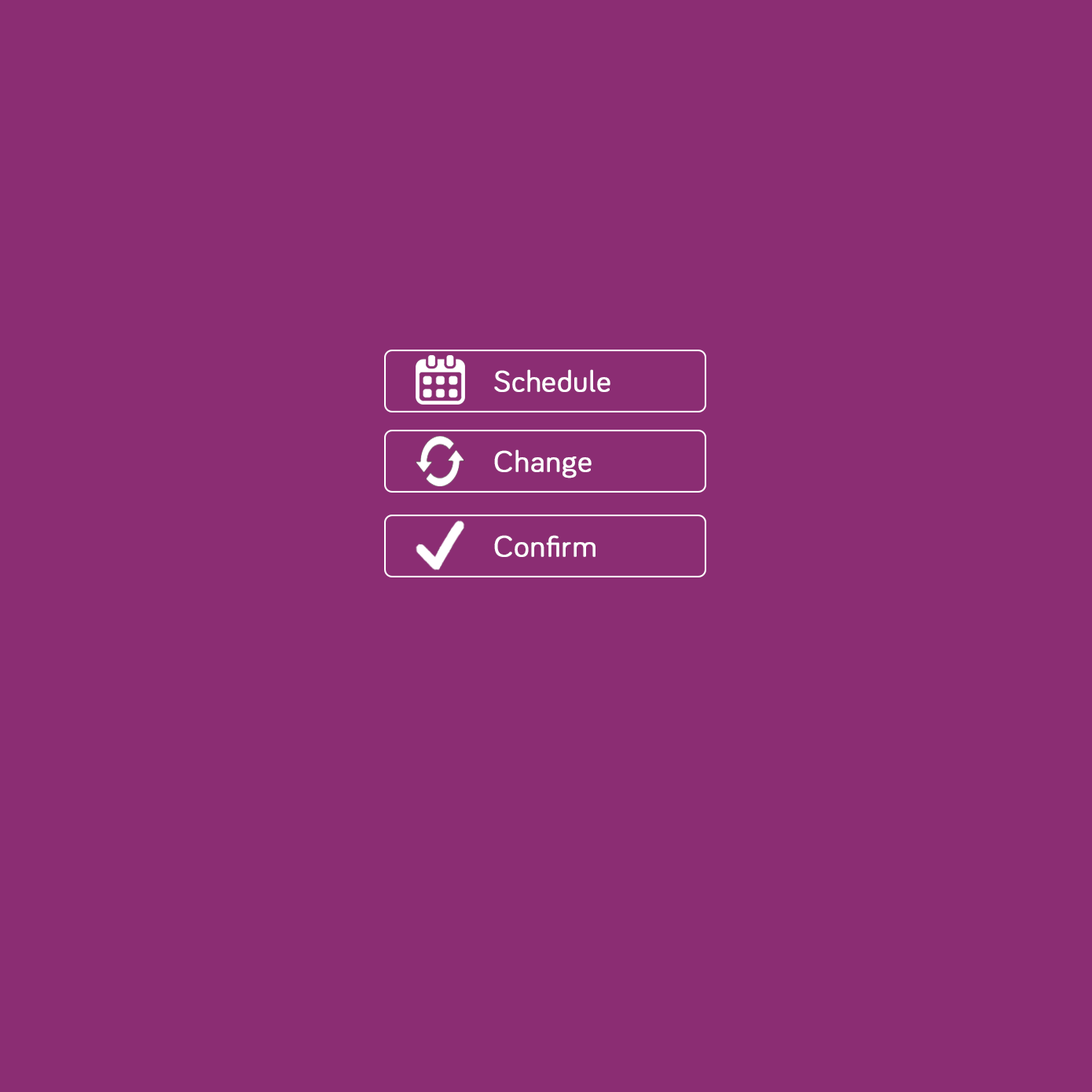
<style>
.page{position:relative;width:1092px;height:1092px;background:#8b2d73}
.page>*{position:absolute;margin:0}
.t1{font:30.1px "Bariol-Regular";letter-spacing:0.01em;color:#fefefe;font-weight:bold}
</style>
<div class="page">
<p class="t1" style="left:494px;top:369px;width:116px;height:23px">Schedule</p>
<p class="t1" style="left:494px;top:449px;width:98px;height:29px">Change</p>
<p class="t1" style="left:494px;top:535px;width:101px;height:22px">Confirm</p>
</div>
